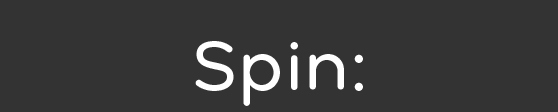
<style>
.page{position:relative;width:558px;height:112px;background:#333333}
.page>*{position:absolute;margin:0}
.t1{font:71.1px "PollyRounded-Regular";color:#ffffff}
</style>
<div class="page">
<p class="t1" style="left:195px;top:41px;width:168px;height:65px">Spin:</p>
</div>
